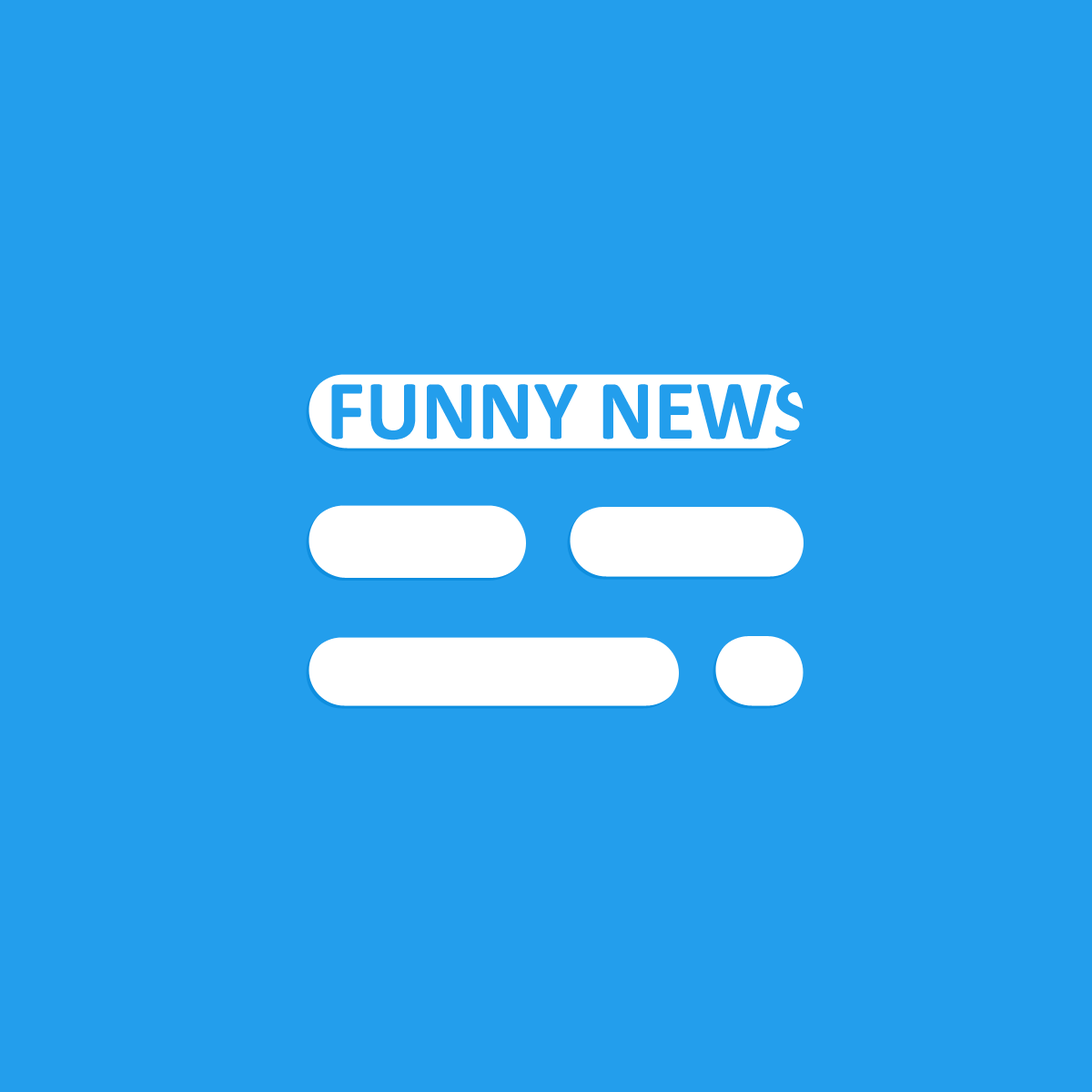
<style>
.page{position:relative;width:1092px;height:1092px;background:#239eec}
.page>*{position:absolute;margin:0}
.t1{font:85.5px "Calibri-Bold";color:#239eec}
</style>
<div class="page">
<p class="t1" style="left:331px;top:383px;width:481px;height:57px">FUNNY NEWS</p>
</div>
